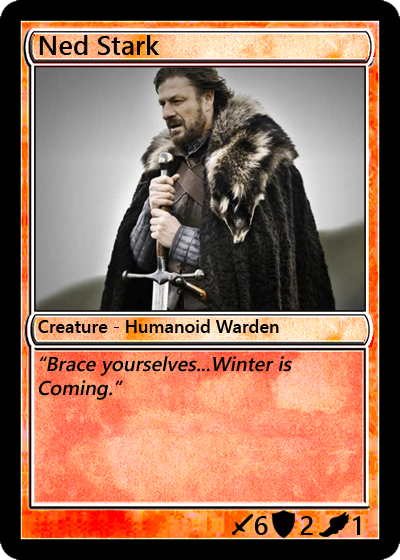
<style>
.page{position:relative;width:400px;height:560px}
.page>*{position:absolute;margin:0}
.t1{font:27px "YuGothicUI-Semibold";color:#000000}
.t2{font:18px "YuGothicUI-Semibold";color:#000000}
.t3{font:20px "YuGothicUI-Semibold";color:#000000;font-style:italic}
</style>
<div class="page">
<p class="t1" style="left:39px;top:35px;width:121px;height:20px">Ned Stark</p>
<p class="t2" style="left:38px;top:319px;width:241px;height:14px">Creature - Humanoid Warden</p>
<p class="t3" style="left:39px;top:356px;width:253px;height:44px">“Brace yourselves...Winter is Coming.”</p>
<p class="t1" style="left:254px;top:516px;width:14px;height:19px">6</p>
<p class="t1" style="left:300px;top:516px;width:13px;height:19px">2</p>
<p class="t1" style="left:353px;top:516px;width:8px;height:19px">1</p>
</div>
